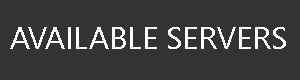
<style>
.page{position:relative;width:300px;height:80px;background:#333333}
.page>*{position:absolute;margin:0}
.t1{font:30.6px "SegoeUI";color:#fdfcfc}
</style>
<div class="page">
<p class="t1" style="left:10px;top:27px;width:276px;height:22px">AVAILABLE SERVERS</p>
</div>
